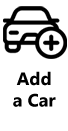
<style>
.page{position:relative;width:68px;height:131px;background:#ffffff}
.page>*{position:absolute;margin:0}
.t1{font:18px "MicrosoftTaiLe-Bold";color:#000000}
</style>
<div class="page">
<p class="t1" style="left:13px;top:71px;width:43px;height:36px;text-align:center">Add<br>a Car</p>
</div>
